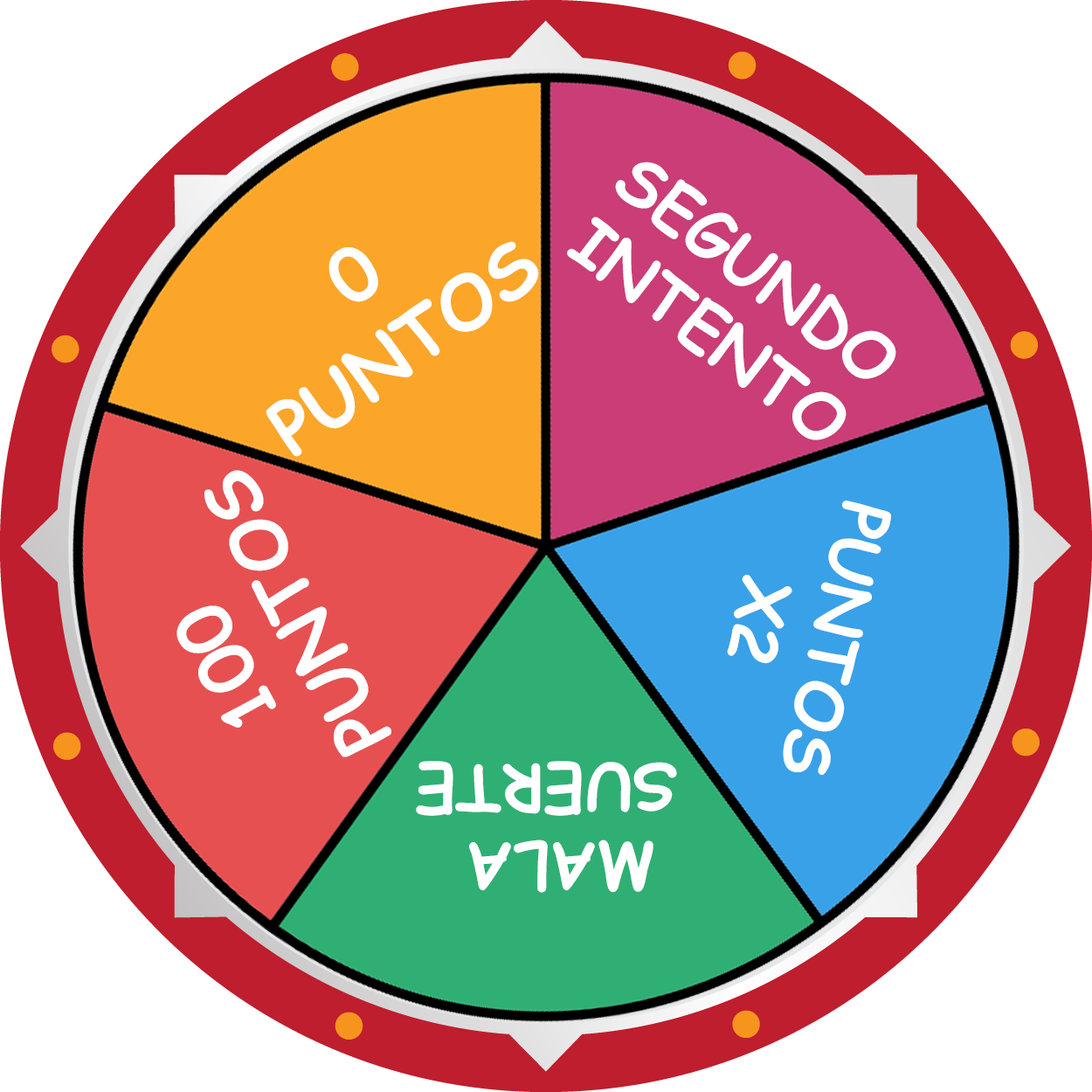
<style>
.page{position:relative;width:1092px;height:1092px;background:#ffffff}
.page>*{position:absolute;margin:0}
.t1{font:65.5px "ComicSansMS-Bold";color:#ffffff}
.t2{font:72.8px "ComicSansMS-Bold";color:#ffffff}
</style>
<div class="page">
<p class="t1" style="left:567px;top:162px;width:329px;height:278px;text-align:center;rotate:37deg">SEGUNDO<br>INTENTO</p>
<p class="t2" style="left:266px;top:241px;width:273px;height:216px;text-align:center;rotate:-36deg">0<br>PUNTOS</p>
<p class="t2" style="left:176px;top:470px;width:215px;height:287px;text-align:center;rotate:-119deg">100 <br>PUNTOS</p>
<p class="t1" style="left:727px;top:501px;width:164px;height:274px;text-align:center;rotate:103deg">PUNTOS<br>X2</p>
<p class="t1" style="left:416px;top:761px;width:261px;height:132px;text-align:center;rotate:-180deg">MALA <br>SUERTE</p>
</div>
